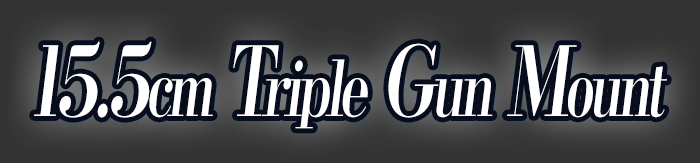
<style>
.page{position:relative;width:700px;height:163px}
.page>*{position:absolute;margin:0}
.t1{font:76.8px "KochoStd-Heavy";letter-spacing:-0.08em;color:#ffffff;font-style:italic;scale:0.7 1}
.t2{font:96px "KochoStd-Heavy";letter-spacing:-0.08em;color:#ffffff;font-style:italic;scale:0.7 1}
</style>
<div class="page">
<p class="t1" style="left:34px;top:41px;width:633px;height:88px"><span class="t2">15.5</span>cm<span class="t2"> T</span>riple<span class="t2"> G</span>un<span class="t2"> M</span>ount</p>
</div>
